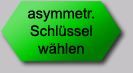
<style>
.page{position:relative;width:133px;height:73px;background:#c6c3c6}
.page>*{position:absolute;margin:0}
.t1{font:14.7px "ArialMT";color:#000000}
</style>
<div class="page">
<p class="t1" style="left:28px;top:8px;width:66px;height:46px;text-align:center">asymmetr.<br>Schlüssel<br>wählen</p>
</div>
